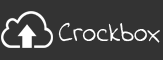
<style>
.page{position:relative;width:163px;height:60px;background:#333333}
.page>*{position:absolute;margin:0}
.t1{font:28px "IndieFlower";color:#ffffff}
</style>
<div class="page">
<p class="t1" style="left:58px;top:22px;width:102px;height:21px">Crockbox</p>
</div>
